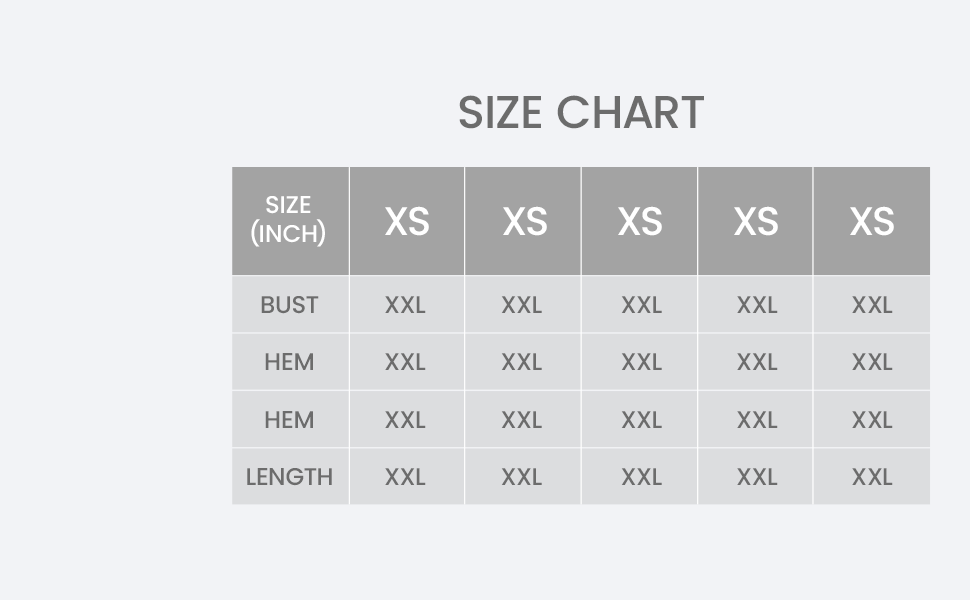
<style>
.page{position:relative;width:970px;height:600px;background:#f2f3f6}
.page>*{position:absolute;margin:0}
.t1{font:46px "Poppins-Medium";color:#6c6c6c;text-transform:uppercase}
.t2{font:24.3px "Poppins-Medium";color:#ffffff;text-transform:uppercase}
.t3{font:40px "Poppins-Medium";color:#ffffff;text-transform:uppercase}
.t4{font:24.3px "Poppins-Medium";color:#6c6c6c;text-transform:uppercase}
</style>
<div class="page">
<p class="t1" style="left:459px;top:95px;width:245px;height:34px">SIZE CHART</p>
<p class="t2" style="left:251px;top:196px;width:74px;height:51px;text-align:center">size<br>(INCH)</p>
<p class="t3" style="left:385px;top:206px;width:44px;height:30px">XS</p>
<p class="t3" style="left:503px;top:206px;width:44px;height:30px">XS</p>
<p class="t3" style="left:618px;top:206px;width:44px;height:30px">XS</p>
<p class="t3" style="left:734px;top:206px;width:44px;height:30px">XS</p>
<p class="t3" style="left:850px;top:206px;width:44px;height:30px">XS</p>
<p class="t4" style="left:261px;top:296px;width:58px;height:18px">Bust</p>
<p class="t4" style="left:385px;top:296px;width:41px;height:17px">XXL</p>
<p class="t4" style="left:501px;top:296px;width:41px;height:17px">XXL</p>
<p class="t4" style="left:621px;top:296px;width:41px;height:17px">XXL</p>
<p class="t4" style="left:737px;top:296px;width:41px;height:17px">XXL</p>
<p class="t4" style="left:852px;top:296px;width:41px;height:17px">XXL</p>
<p class="t4" style="left:265px;top:353px;width:48px;height:17px">Hem</p>
<p class="t4" style="left:385px;top:353px;width:41px;height:17px">XXL</p>
<p class="t4" style="left:501px;top:353px;width:41px;height:17px">XXL</p>
<p class="t4" style="left:621px;top:353px;width:41px;height:17px">XXL</p>
<p class="t4" style="left:737px;top:353px;width:41px;height:17px">XXL</p>
<p class="t4" style="left:852px;top:353px;width:41px;height:17px">XXL</p>
<p class="t4" style="left:265px;top:411px;width:48px;height:17px">Hem</p>
<p class="t4" style="left:385px;top:411px;width:41px;height:17px">XXL</p>
<p class="t4" style="left:501px;top:411px;width:41px;height:17px">XXL</p>
<p class="t4" style="left:621px;top:411px;width:41px;height:17px">XXL</p>
<p class="t4" style="left:737px;top:411px;width:41px;height:17px">XXL</p>
<p class="t4" style="left:852px;top:411px;width:41px;height:17px">XXL</p>
<p class="t4" style="left:247px;top:468px;width:85px;height:18px">Length</p>
<p class="t4" style="left:385px;top:468px;width:41px;height:17px">XXL</p>
<p class="t4" style="left:501px;top:468px;width:41px;height:17px">XXL</p>
<p class="t4" style="left:621px;top:468px;width:41px;height:17px">XXL</p>
<p class="t4" style="left:737px;top:468px;width:41px;height:17px">XXL</p>
<p class="t4" style="left:852px;top:468px;width:41px;height:17px">XXL</p>
</div>
